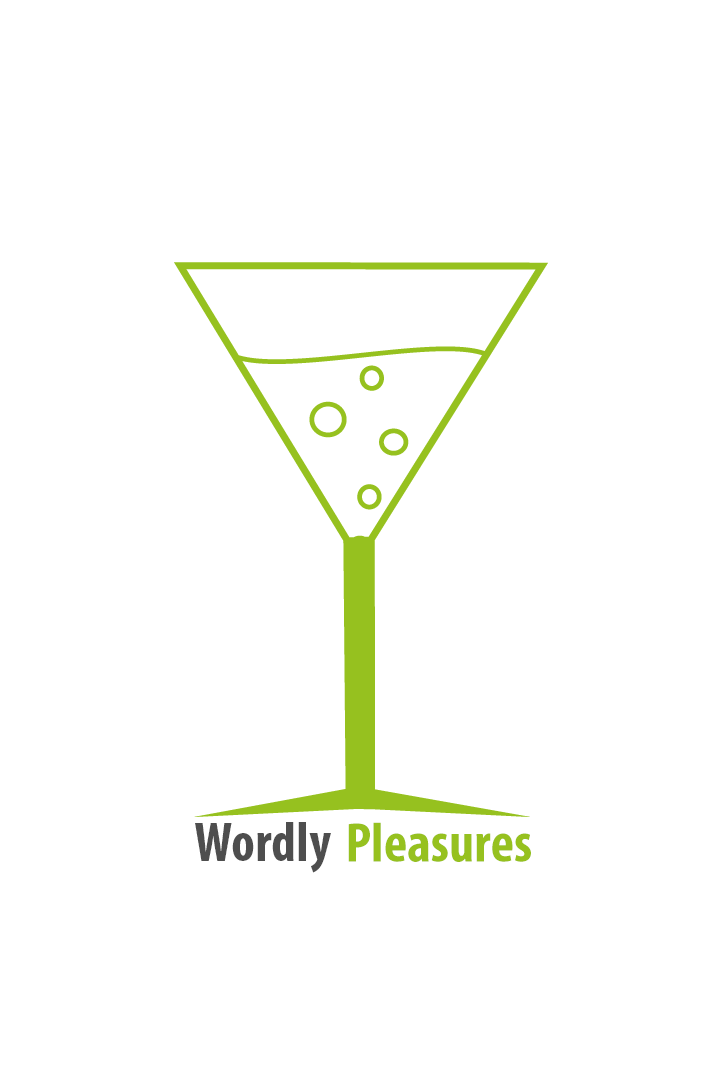
<style>
.page{position:relative;width:720px;height:1080px;background:#ffffff}
.page>*{position:absolute;margin:0}
.t1{font:56px "MyriadPro-BoldCond";color:#4e4e4e}
.t2{font:56px "MyriadPro-BoldCond";color:#96c11f}
</style>
<div class="page">
<p class="t1" style="left:195px;top:822px;width:136px;height:51px">Wordly</p>
<p class="t2" style="left:348px;top:822px;width:183px;height:40px">Pleasures</p>
</div>
